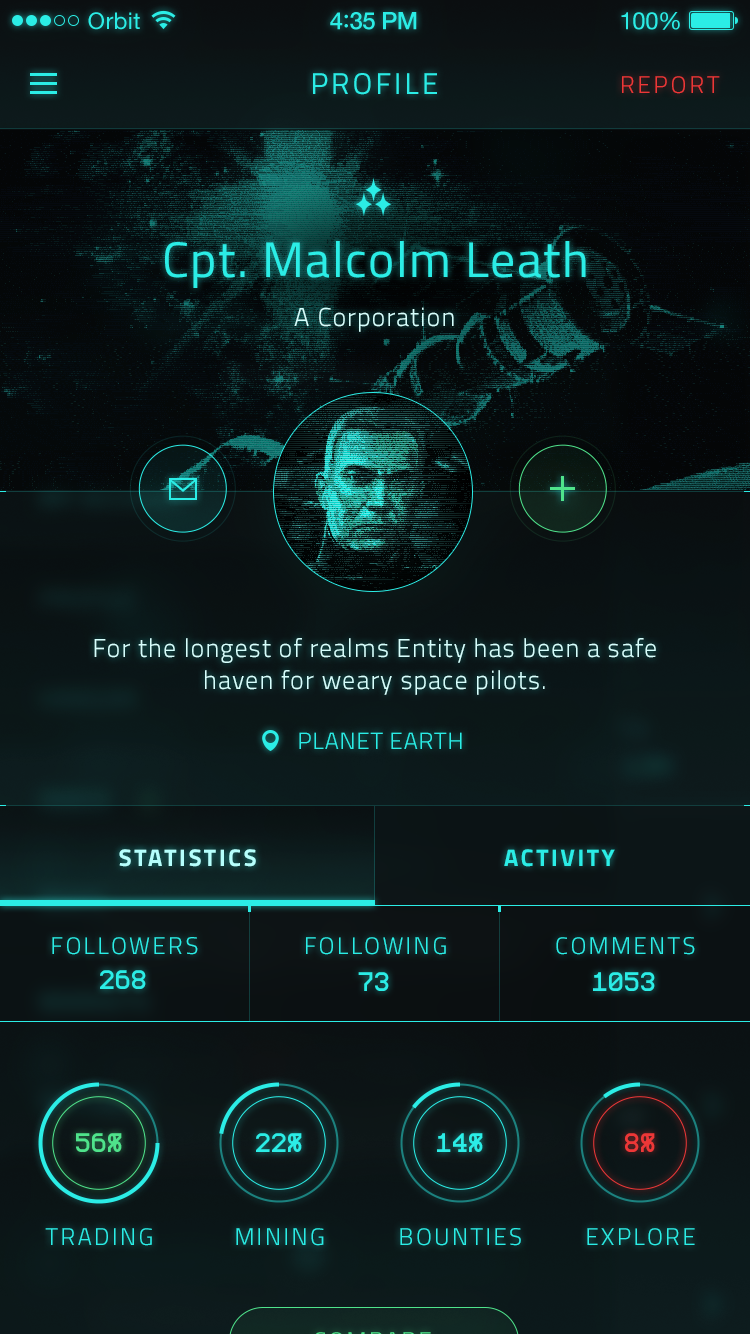
<style>
.page{position:relative;width:750px;height:1334px}
.page>*{position:absolute;margin:0}
.t1{font:23px "HelveticaNeue";letter-spacing:0.02em;color:#2bede6}
.t2{font:24px "HelveticaNeue-Medium";letter-spacing:-0.02em;color:#2bede6}
.t3{font:26px "Avenir-Medium";letter-spacing:-0.02em;color:#2bede6}
.t4{font:24px "HelveticaNeue";letter-spacing:-0.02em;color:#2bede6}
.t5{font:30px "Titillium-Regular";letter-spacing:0.1em;color:#2bede6;text-transform:uppercase}
.t6{font:24px "Titillium-Light";letter-spacing:0.12em;color:#ed3737;text-transform:uppercase}
.t7{font:50px "Titillium-Regular";letter-spacing:0.03em;color:#2bede6}
.t8{font:26px "Titillium-Light";letter-spacing:0.04em;color:#d6fffd}
.t9{font:26px/32px "Titillium-Light";letter-spacing:0.04em;color:#d6fffd}
.t10{font:23.3px "Titillium-Light";letter-spacing:0.03em;color:#2bede6;text-transform:uppercase}
.t11{font:24px "Titillium-Bold";letter-spacing:0.1em;color:#b5fffc;text-transform:uppercase}
.t12{font:24px "Titillium-Bold";letter-spacing:0.1em;color:#2bede6;text-transform:uppercase}
.t13{font:24px "Titillium-Light";letter-spacing:0.1em;color:#2bede6;text-transform:uppercase}
.t14{font:32px "ProFontWindows";color:#2bede6;text-transform:uppercase}
.t15{font:32px "ProFontWindows";color:#4fe38b}
.t16{font:32px "ProFontWindows";color:#2bede6}
.t17{font:32px "ProFontWindows";color:#ed3737}
</style>
<div class="page">
<p class="t1" style="left:88px;top:12px;width:52px;height:18px">Orbit</p>
<p class="t2" style="left:330px;top:12px;width:87px;height:18px">4<span class="t3">:</span>35 PM</p>
<p class="t4" style="left:621px;top:12px;width:59px;height:18px">100%</p>
<p class="t5" style="left:313px;top:73px;width:124px;height:22px">Profile</p>
<p class="t6" style="left:622px;top:76px;width:98px;height:18px">Report</p>
<p class="t7" style="left:165px;top:241px;width:421px;height:47px">Cpt. Malcolm Leath</p>
<p class="t8" style="left:294px;top:307px;width:160px;height:25px">A Corporation</p>
<p class="t9" style="left:94px;top:638px;width:562px;height:57px;text-align:center">For the longest of realms Entity has been a safe haven for weary space pilots.</p>
<p class="t10" style="left:299px;top:732px;width:163px;height:17px">Planet Earth</p>
<p class="t11" style="left:119px;top:849px;width:137px;height:18px">Statistics</p>
<p class="t12" style="left:504px;top:849px;width:111px;height:18px">Activity</p>
<p class="t13" style="left:52px;top:937px;width:146px;height:18px">Followers</p>
<p class="t13" style="left:306px;top:937px;width:140px;height:18px">Following</p>
<p class="t13" style="left:556px;top:937px;width:139px;height:18px">Comments</p>
<p class="t14" style="left:100px;top:970px;width:46px;height:19px">268</p>
<p class="t14" style="left:358px;top:972px;width:31px;height:19px">73</p>
<p class="t14" style="left:593px;top:972px;width:62px;height:19px">1053</p>
<p class="t15" style="left:76px;top:1133px;width:46px;height:19px">56%</p>
<p class="t16" style="left:256px;top:1133px;width:46px;height:19px">22%</p>
<p class="t16" style="left:437px;top:1133px;width:46px;height:19px">14%</p>
<p class="t17" style="left:625px;top:1133px;width:30px;height:19px">8%</p>
<p class="t13" style="left:45px;top:1228px;width:107px;height:18px">TRADING</p>
<p class="t13" style="left:236px;top:1228px;width:88px;height:18px">MINING</p>
<p class="t13" style="left:400px;top:1228px;width:121px;height:18px">BOUNTIES</p>
<p class="t13" style="left:587px;top:1228px;width:108px;height:18px">EXPLORE</p>
</div>
